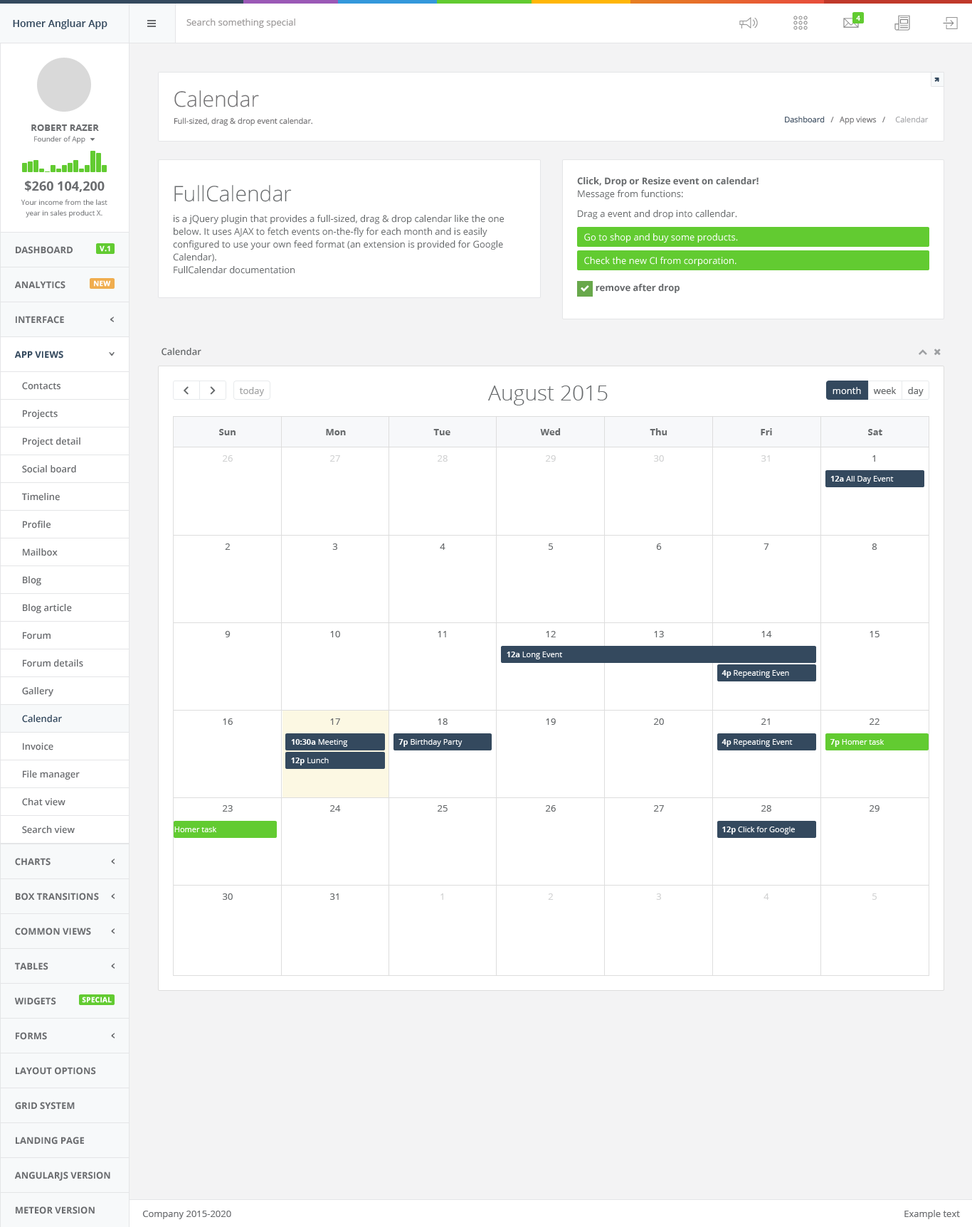
<style>
.page{position:relative;width:972px;height:1227px;background:#ffffff}
.page>*{position:absolute;margin:0}
.t1{font:7.1px "OpenSans-Bold";color:#ffffff}
.t2{font:10px "OpenSans-Semibold";color:#34495e}
.t3{font:9.2px "OpenSans";color:#9c9999}
.t4{font:21.3px "OpenSans-Light";color:#727173}
.t5{font:9.2px "OpenSans-Bold";color:#6a6c6f}
.t6{font:7.8px "OpenSans";color:#727173}
.t7{font:7.8px "OpenSans";color:#3c4d60}
.t8{font:7.8px "OpenSans";color:#a5a6a9}
.t9{font:7.1px "OpenSans";color:#6a6c6f}
.t10{font:12.8px "OpenSans-Bold";color:#6a6c6f}
.t11{font:21.3px "OpenSans-Light";color:#676a6c}
.t12{font:9.2px/12.8px "OpenSans-Bold";color:#676a6c}
.t13{font:9.2px/12.8px "OpenSans";color:#676a6c}
.t14{font:7.1px/10.7px "OpenSans";color:#6a6c6f}
.t15{font:9.2px "OpenSans";color:#676a6c}
.t16{font:9.2px "OpenSans";color:#ffffff}
.t17{font:7.1px "OpenSans-Bold";color:#ffffff;font-weight:bold}
.t18{font:9.2px "OpenSans-Bold";color:#676a6c}
.t19{font:9.2px "OpenSans-Bold";color:#34495e}
.t20{font:9.2px "OpenSans-Semibold";color:#676a6c}
.t21{font:9.2px "OpenSans-Semibold";color:#6a6c6f}
.t22{font:9.2px "OpenSans";color:#a3a4a5}
.t23{font:9.2px "OpenSans";color:#d1d2d3}
.t24{font:7.8px "OpenSans";color:#ffffff}
.t25{font:7.8px "OpenSans-Bold";color:#ffffff}
.t26{font:9.2px "OpenSans-Semibold";color:#34495e}
.t27{font:9.2px "OpenSans"}
.t28{font:9.2px "OpenSans";color:#6a6c6f}
</style>
<div class="page">
<p class="t1" style="left:856px;top:16px;width:4px;height:5px">4</p>
<p class="t2" style="left:13px;top:19px;width:94px;height:10px">Homer Angluar App</p>
<p class="t3" style="left:186px;top:18px;width:109px;height:10px">Search something special</p>
<p class="t4" style="left:174px;top:90px;width:85px;height:17px">Calendar</p>
<p class="t5" style="left:31px;top:124px;width:68px;height:7px">ROBERT RAZER</p>
<p class="t6" style="left:174px;top:117px;width:138px;height:9px">Full-sized, drag &amp; drop event calendar.</p>
<p class="t6" style="left:785px;top:116px;width:143px;height:8px"><span class="t7">Dashboard</span>   /   App views   /    <span class="t8"> Calendar</span></p>
<p class="t9" style="left:34px;top:136px;width:51px;height:8px">Founder of App</p>
<p class="t10" style="left:25px;top:181px;width:80px;height:11px">$260 104,200</p>
<p class="t11" style="left:174px;top:185px;width:118px;height:17px">FullCalendar</p>
<p class="t12" style="left:577px;top:177px;width:181px;height:22px">Click, Drop or Resize event on calendar!<br><span class="t13">Message from functions:</span></p>
<p class="t14" style="left:21px;top:199px;width:86px;height:19px;text-align:center">Your income from the last<br>year in sales product X.</p>
<p class="t15" style="left:578px;top:210px;width:159px;height:9px">Drag a event and drop into callendar.</p>
<p class="t13" style="left:173px;top:215px;width:331px;height:59px">is a jQuery plugin that provides a full-sized, drag &amp; drop calendar like the one below. It uses AJAX to fetch events on-the-fly for each month and is easily configured to use your own feed format (an extension is provided for Google Calendar).<br>FullCalendar documentation</p>
<p class="t16" style="left:584px;top:233px;width:154px;height:10px">Go to shop and buy some products.</p>
<p class="t17" style="left:100px;top:245px;width:10px;height:7px">V.1</p>
<p class="t5" style="left:16px;top:246px;width:57px;height:8px">DASHBOARD</p>
<p class="t16" style="left:584px;top:257px;width:152px;height:9px">Check the new CI from corporation.</p>
<p class="t5" style="left:14px;top:281px;width:51px;height:8px">ANALYTICS</p>
<p class="t17" style="left:94px;top:280px;width:17px;height:7px">NEW</p>
<p class="t18" style="left:595px;top:284px;width:84px;height:9px">remove after drop</p>
<p class="t5" style="left:16px;top:316px;width:48px;height:8px">INTERFACE</p>
<p class="t19" style="left:14px;top:351px;width:49px;height:8px">APP VIEWS</p>
<p class="t20" style="left:161px;top:348px;width:40px;height:8px">Calendar</p>
<p class="t21" style="left:22px;top:382px;width:38px;height:8px">Contacts</p>
<p class="t22" style="left:239px;top:387px;width:25px;height:9px">today</p>
<p class="t11" style="left:488px;top:386px;width:120px;height:19px">August 2015</p>
<p class="t16" style="left:832px;top:387px;width:29px;height:7px">month</p>
<p class="t15" style="left:873px;top:387px;width:23px;height:7px">week</p>
<p class="t15" style="left:908px;top:387px;width:15px;height:9px">day</p>
<p class="t21" style="left:23px;top:410px;width:35px;height:9px">Projects</p>
<p class="t21" style="left:23px;top:437px;width:57px;height:10px">Project detail</p>
<p class="t18" style="left:219px;top:429px;width:16px;height:6px">Sun</p>
<p class="t18" style="left:326px;top:429px;width:20px;height:6px">Mon</p>
<p class="t18" style="left:433px;top:429px;width:17px;height:6px">Tue</p>
<p class="t18" style="left:540px;top:428px;width:21px;height:7px">Wed</p>
<p class="t18" style="left:649px;top:428px;width:18px;height:7px">Thu</p>
<p class="t18" style="left:760px;top:428px;width:12px;height:7px">Fri</p>
<p class="t18" style="left:868px;top:429px;width:14px;height:6px">Sat</p>
<p class="t23" style="left:223px;top:455px;width:10px;height:7px">26</p>
<p class="t23" style="left:330px;top:455px;width:10px;height:7px">27</p>
<p class="t23" style="left:437px;top:455px;width:10px;height:7px">28</p>
<p class="t23" style="left:546px;top:455px;width:10px;height:7px">29</p>
<p class="t23" style="left:654px;top:455px;width:10px;height:7px">30</p>
<p class="t23" style="left:761px;top:455px;width:9px;height:7px">31</p>
<p class="t15" style="left:872px;top:455px;width:3px;height:7px">1</p>
<p class="t21" style="left:22px;top:465px;width:54px;height:8px">Social board</p>
<p class="t24" style="left:830px;top:476px;width:63px;height:8px"><span class="t25">12a</span> All Day Event</p>
<p class="t21" style="left:22px;top:493px;width:38px;height:8px">Timeline</p>
<p class="t21" style="left:23px;top:521px;width:28px;height:8px">Profile</p>
<p class="t15" style="left:225px;top:543px;width:5px;height:7px">2</p>
<p class="t15" style="left:332px;top:543px;width:5px;height:7px">3</p>
<p class="t15" style="left:440px;top:543px;width:5px;height:7px">4</p>
<p class="t15" style="left:548px;top:543px;width:5px;height:7px">5</p>
<p class="t15" style="left:656px;top:543px;width:6px;height:7px">6</p>
<p class="t15" style="left:763px;top:543px;width:6px;height:7px">7</p>
<p class="t15" style="left:871px;top:543px;width:6px;height:7px">8</p>
<p class="t21" style="left:23px;top:548px;width:35px;height:8px">Mailbox</p>
<p class="t21" style="left:23px;top:576px;width:18px;height:9px">Blog</p>
<p class="t21" style="left:23px;top:604px;width:49px;height:9px">Blog article</p>
<p class="t21" style="left:23px;top:632px;width:28px;height:8px">Forum</p>
<p class="t15" style="left:225px;top:631px;width:5px;height:6px">9</p>
<p class="t15" style="left:330px;top:631px;width:10px;height:6px">10</p>
<p class="t15" style="left:437px;top:631px;width:9px;height:6px">11</p>
<p class="t15" style="left:546px;top:631px;width:10px;height:6px">12</p>
<p class="t15" style="left:654px;top:631px;width:10px;height:6px">13</p>
<p class="t15" style="left:761px;top:631px;width:11px;height:6px">14</p>
<p class="t15" style="left:869px;top:631px;width:10px;height:6px">15</p>
<p class="t24" style="left:506px;top:652px;width:56px;height:7px"><span class="t25">12a </span>Long Event</p>
<p class="t21" style="left:23px;top:659px;width:60px;height:8px">Forum details</p>
<p class="t24" style="left:721px;top:670px;width:68px;height:8px"><span class="t25">4p </span>Repeating Even</p>
<p class="t21" style="left:22px;top:687px;width:31px;height:9px">Gallery</p>
<p class="t26" style="left:22px;top:715px;width:40px;height:8px">Calendar</p>
<p class="t15" style="left:223px;top:718px;width:10px;height:7px">16</p>
<p class="t15" style="left:330px;top:718px;width:10px;height:7px">17</p>
<p class="t15" style="left:437px;top:718px;width:10px;height:7px">18</p>
<p class="t15" style="left:546px;top:718px;width:10px;height:7px">19</p>
<p class="t15" style="left:654px;top:718px;width:10px;height:7px">20</p>
<p class="t15" style="left:761px;top:718px;width:9px;height:7px">21</p>
<p class="t15" style="left:869px;top:718px;width:10px;height:7px">22</p>
<p class="t21" style="left:23px;top:743px;width:30px;height:7px">Invoice</p>
<p class="t24" style="left:291px;top:739px;width:57px;height:8px"><span class="t25">10:30a</span> Meeting</p>
<p class="t24" style="left:398px;top:739px;width:64px;height:8px"><span class="t25">7p</span> Birthday Party</p>
<p class="t24" style="left:721px;top:739px;width:71px;height:8px"><span class="t25">4p </span>Repeating Event</p>
<p class="t24" style="left:829px;top:739px;width:55px;height:8px"><span class="t25">7p</span> Homer task</p>
<p class="t24" style="left:291px;top:758px;width:38px;height:7px"><span class="t25">12p</span> Lunch</p>
<p class="t21" style="left:23px;top:770px;width:57px;height:10px">File manager</p>
<p class="t21" style="left:22px;top:798px;width:43px;height:8px">Chat view</p>
<p class="t15" style="left:223px;top:805px;width:10px;height:7px">23</p>
<p class="t15" style="left:330px;top:805px;width:11px;height:7px">24</p>
<p class="t15" style="left:437px;top:805px;width:10px;height:7px">25</p>
<p class="t15" style="left:546px;top:805px;width:10px;height:7px">26</p>
<p class="t15" style="left:654px;top:805px;width:10px;height:7px">27</p>
<p class="t15" style="left:761px;top:805px;width:10px;height:7px">28</p>
<p class="t15" style="left:869px;top:805px;width:10px;height:7px">29</p>
<p class="t21" style="left:22px;top:826px;width:53px;height:8px">Search view</p>
<p class="t24" style="left:174px;top:827px;width:43px;height:5px">Homer task</p>
<p class="t24" style="left:722px;top:827px;width:73px;height:7px"><span class="t25">12p </span>Click for Google</p>
<p class="t5" style="left:15px;top:858px;width:36px;height:8px">CHARTS</p>
<p class="t5" style="left:16px;top:893px;width:83px;height:8px">BOX TRANSITIONS</p>
<p class="t15" style="left:223px;top:893px;width:10px;height:7px">30</p>
<p class="t15" style="left:330px;top:893px;width:9px;height:7px">31</p>
<p class="t27" style="left:440px;top:893px;width:3px;height:7px">1</p>
<p class="t23" style="left:548px;top:893px;width:5px;height:7px">2</p>
<p class="t23" style="left:656px;top:893px;width:5px;height:7px">3</p>
<p class="t23" style="left:763px;top:893px;width:6px;height:7px">4</p>
<p class="t23" style="left:872px;top:893px;width:4px;height:7px">5</p>
<p class="t5" style="left:15px;top:928px;width:76px;height:7px">COMMON VIEWS</p>
<p class="t5" style="left:15px;top:962px;width:33px;height:8px">TABLES</p>
<p class="t5" style="left:14px;top:997px;width:42px;height:8px">WIDGETS</p>
<p class="t17" style="left:82px;top:997px;width:30px;height:6px">SPECIAL</p>
<p class="t5" style="left:16px;top:1032px;width:31px;height:8px">FORMS</p>
<p class="t5" style="left:16px;top:1067px;width:80px;height:8px">LAYOUT OPTIONS</p>
<p class="t5" style="left:15px;top:1102px;width:60px;height:8px">GRID SYSTEM</p>
<p class="t5" style="left:16px;top:1137px;width:68px;height:8px">LANDING PAGE</p>
<p class="t5" style="left:14px;top:1172px;width:96px;height:9px">ANGULARJS VERSION</p>
<p class="t5" style="left:16px;top:1206px;width:79px;height:8px">METEOR VERSION</p>
<p class="t28" style="left:142px;top:1211px;width:89px;height:8px">Company 2015-2020</p>
<p class="t28" style="left:904px;top:1210px;width:56px;height:9px">Example text</p>
</div>
